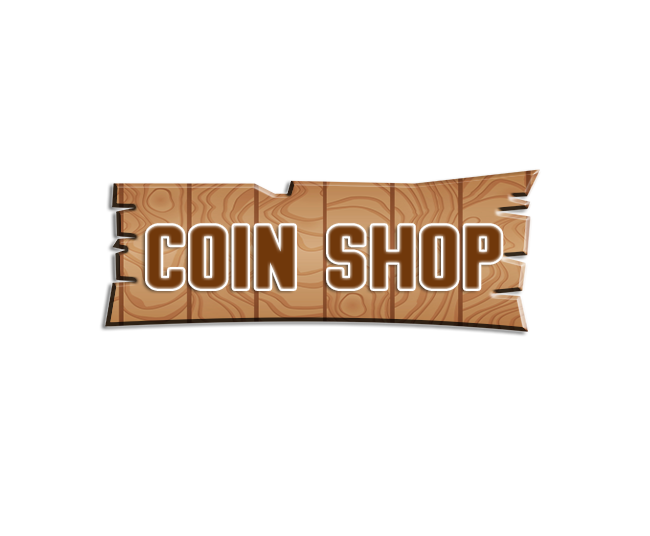
<style>
.page{position:relative;width:650px;height:536px;background:#ffffff}
.page>*{position:absolute;margin:0}
.t1{font:70px "BrewmasterGothicRound";color:#70380b;scale:1.26 1}
</style>
<div class="page">
<p class="t1" style="left:147px;top:225px;width:355px;height:64px">coin shop</p>
</div>
